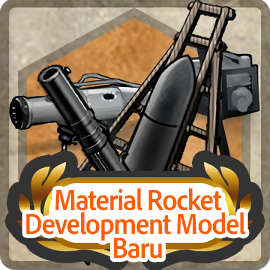
<style>
.page{position:relative;width:270px;height:270px}
.page>*{position:absolute;margin:0}
.t1{font:30px/24px "AdobeClean-Bold";letter-spacing:-0.04em;color:#ff5d00;scale:0.9 1}
</style>
<div class="page">
<p class="t1" style="left:26px;top:188px;width:220px;height:71px;text-align:center">Material Rocket<br>Development Model <br>Baru</p>
</div>
